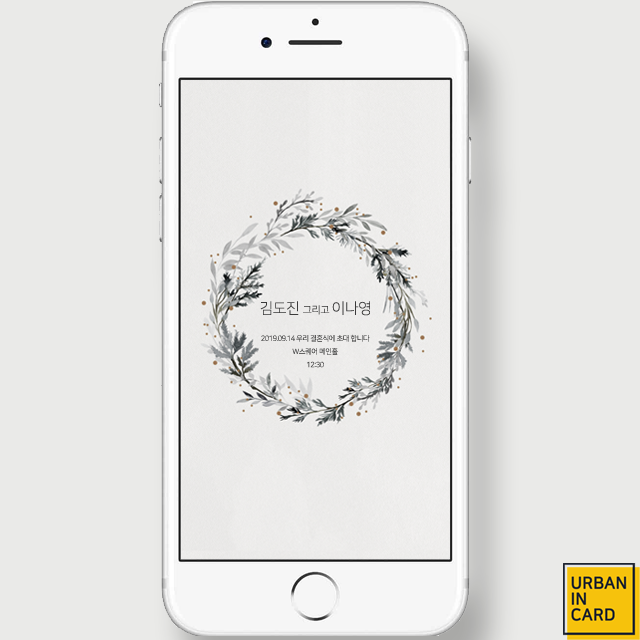
<style>
.page{position:relative;width:640px;height:640px;background:#eaeae8}
.page>*{position:absolute;margin:0}
.t1{font:14.9px "NanumSquareL";letter-spacing:-0.02em;color:#3a3a3a}
.t2{font:9.9px "NanumSquareL";letter-spacing:-0.02em;color:#3a3a3a}
.t3{font:7.2px/13.1px "NanumSquareL";letter-spacing:-0.04em}
</style>
<div class="page">
<p class="t1" style="left:260px;top:301px;width:110px;height:15px">김도진 <span class="t2">그리고 </span>이나영</p>
<p class="t3" style="left:261px;top:334px;width:109px;height:34px;text-align:center">2019.09.14 우리 결혼식에 초대 합니다<br>W스퀘어 메인홀<br>12:30</p>
</div>
